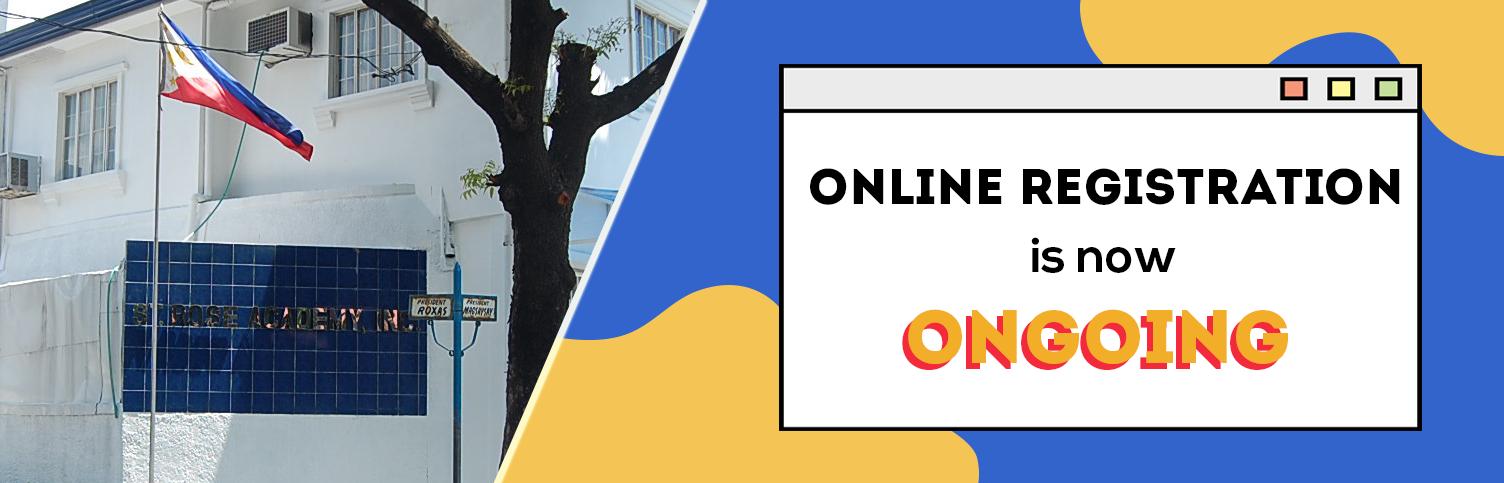
<style>
.page{position:relative;width:1504px;height:483px;background:#ffffff}
.page>*{position:absolute;margin:0}
.t1{font:50px "Intro";color:#000000}
.t2{font:12px "NexaBold";color:#000000}
.t3{font:75px "Intro";text-transform:uppercase}
.t4{font:75px "Intro";color:#f3ae29;text-transform:uppercase}
</style>
<div class="page">
<p class="t1" style="left:810px;top:168px;width:590px;height:37px">online registration</p>
<p class="t2" style="left:1031px;top:237px;width:145px;height:36px">is now</p>
<p class="t3" style="left:902px;top:315px;width:380px;height:55px">ongoing</p>
<p class="t4" style="left:908px;top:309px;width:380px;height:55px">ongoing</p>
</div>
